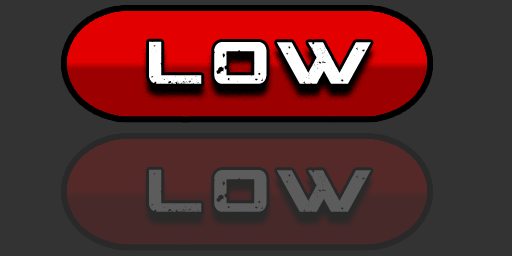
<style>
.page{position:relative;width:512px;height:256px;background:#333333}
.page>*{position:absolute;margin:0}
.t1{font:60px "CGFLocustResistance";letter-spacing:0.1em;color:#ffffff}
.t2{font:60px "CGFLocustResistance";letter-spacing:0.1em;color:#5c5c5c}
</style>
<div class="page">
<p class="t1" style="left:149px;top:41px;width:222px;height:43px">low</p>
<p class="t2" style="left:149px;top:169px;width:222px;height:43px">low</p>
</div>
